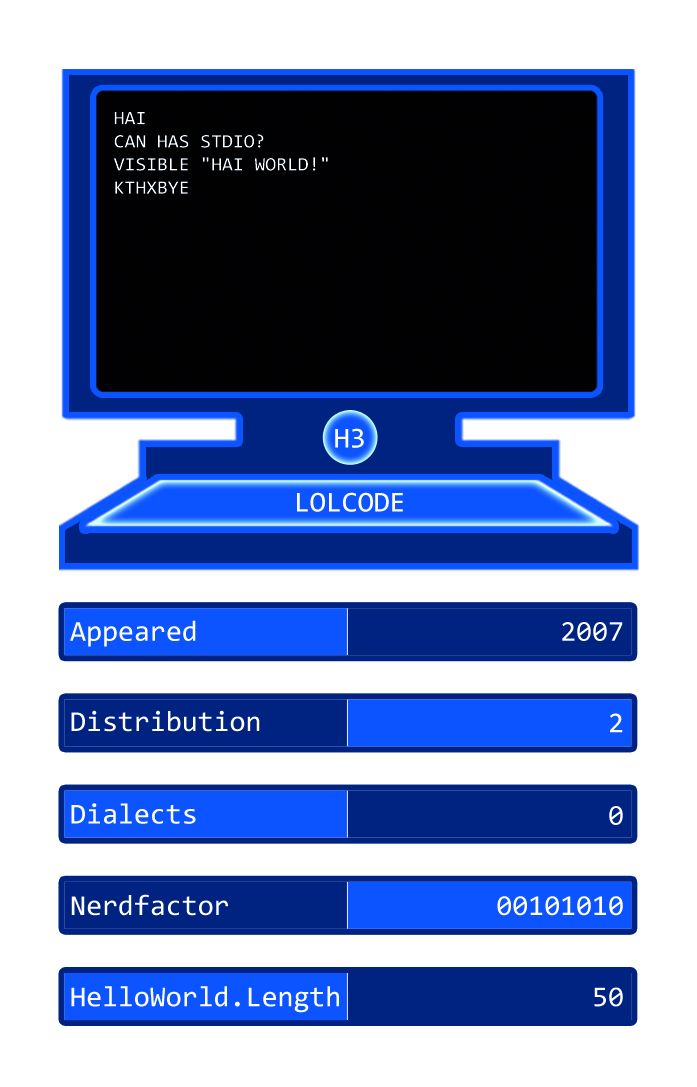
<style>
.page{position:relative;width:697px;height:1087px;background:#ffffff}
.page>*{position:absolute;margin:0}
.t1{font:19.3px "Consolas";color:#ffffff}
.t2{font:29px "Consolas";color:#ffffff}
</style>
<div class="page">
<p class="t1" style="left:113px;top:112px;width:215px;height:82px">HAI<br>CAN HAS STDIO?<br>VISIBLE "HAI WORLD!"<br>KTHXBYE</p>
<p class="t2" style="left:335px;top:428px;width:29px;height:20px">H3</p>
<p class="t2" style="left:297px;top:492px;width:106px;height:20px">LOLCODE</p>
<p class="t2" style="left:70px;top:620px;width:126px;height:27px">Appeared</p>
<p class="t2" style="left:562px;top:622px;width:61px;height:19px">2007</p>
<p class="t2" style="left:71px;top:710px;width:189px;height:22px">Distribution</p>
<p class="t2" style="left:610px;top:713px;width:13px;height:20px">2</p>
<p class="t2" style="left:71px;top:803px;width:125px;height:21px">Dialects</p>
<p class="t2" style="left:609px;top:806px;width:14px;height:19px">0</p>
<p class="t2" style="left:71px;top:894px;width:157px;height:22px">Nerdfactor</p>
<p class="t2" style="left:497px;top:896px;width:126px;height:20px">00101010</p>
<p class="t2" style="left:71px;top:986px;width:268px;height:27px">HelloWorld.Length</p>
<p class="t2" style="left:594px;top:987px;width:29px;height:20px">50</p>
</div>
